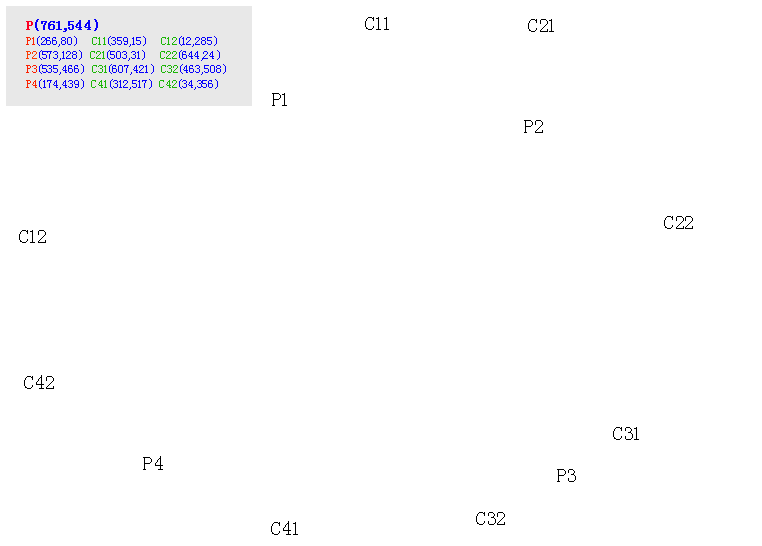
<style>
.page{position:relative;width:762px;height:546px;background:#ffffff}
.page>*{position:absolute;margin:0}
.t1{font:20px "SimSun";letter-spacing:0.1em;color:#000000}
.t2{font:14px "SimSun";letter-spacing:0.1em;color:#0701fc;font-weight:bold}
.t3{font:14px "SimSun";letter-spacing:0.1em;color:#fc0124;font-weight:bold}
.t4{font:12px "SimSun";letter-spacing:0.1em;color:#fc2401}
.t5{font:12px "SimSun";letter-spacing:0.1em;color:#0701fc}
.t6{font:12px "SimSun";letter-spacing:0.1em;color:#1cb607}
.t7{font:12px "SimSun";letter-spacing:0.1em;color:#fc3c01}
.t8{font:12px "SimSun";letter-spacing:0.1em;color:#fc1f01}
</style>
<div class="page">
<p class="t1" style="left:365px;top:17px;width:24px;height:13px">C11</p>
<p class="t2" style="left:26px;top:19px;width:200px;height:71px"><span class="t3">P</span>(761,544)<br><span class="t4">P1</span><span class="t5">(266,80)  </span><span class="t6">C11</span><span class="t5">(359,15)  </span><span class="t6">C12</span><span class="t5">(12,285)<br></span><span class="t7">P2</span><span class="t5">(573,128) </span><span class="t6">C21</span><span class="t5">(503,31)  </span><span class="t6">C22</span><span class="t5">(644,24)<br></span><span class="t8">P3</span><span class="t5">(535,466) </span><span class="t6">C31</span><span class="t5">(607,421) </span><span class="t6">C32</span><span class="t5">(463,508)<br></span><span class="t4">P4</span><span class="t5">(174,439) </span><span class="t6">C41</span><span class="t5">(312,517) </span><span class="t6">C42</span><span class="t5">(34,356)</span></p>
<p class="t1" style="left:528px;top:19px;width:26px;height:13px">C21</p>
<p class="t1" style="left:272px;top:93px;width:15px;height:13px">P1</p>
<p class="t1" style="left:524px;top:120px;width:19px;height:13px">P2</p>
<p class="t1" style="left:664px;top:216px;width:29px;height:13px">C22</p>
<p class="t1" style="left:19px;top:230px;width:27px;height:13px">C12</p>
<p class="t1" style="left:24px;top:375px;width:30px;height:14px">C42</p>
<p class="t1" style="left:613px;top:427px;width:26px;height:13px">C31</p>
<p class="t1" style="left:143px;top:456px;width:20px;height:14px">P4</p>
<p class="t1" style="left:557px;top:469px;width:19px;height:13px">P3</p>
<p class="t1" style="left:271px;top:521px;width:27px;height:14px">C41</p>
<p class="t1" style="left:476px;top:512px;width:29px;height:13px">C32</p>
</div>
